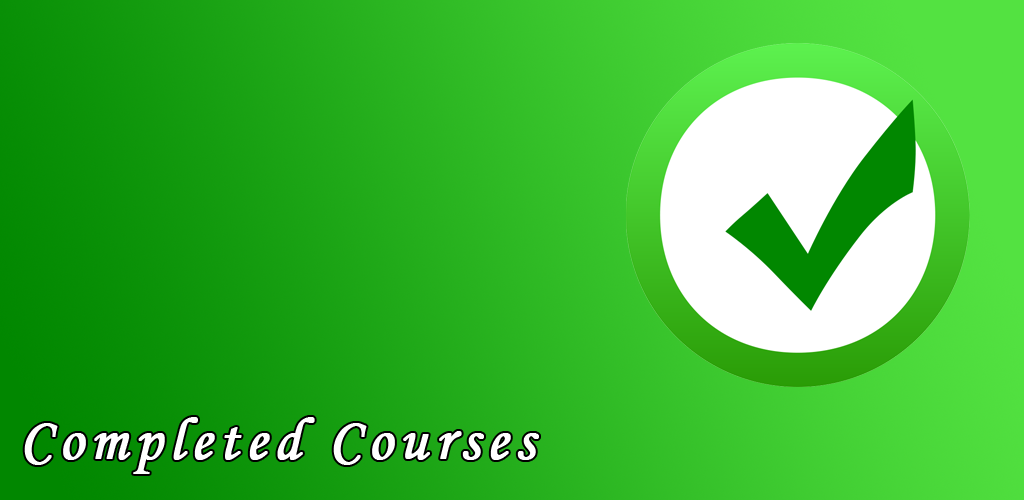
<style>
.page{position:relative;width:1024px;height:500px}
.page>*{position:absolute;margin:0}
.t1{font:60px "MonotypeCorsiva";letter-spacing:0.1em;color:#ffffff;font-weight:bold}
</style>
<div class="page">
<p class="t1" style="left:24px;top:417px;width:515px;height:57px">Completed Courses</p>
</div>
